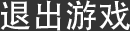
<style>
.page{position:relative;width:130px;height:31px;background:#333333}
.page>*{position:absolute;margin:0}
.t1{font:32.8px "AdobeHeitiStd-Regular";color:#ffffff}
</style>
<div class="page">
<p class="t1" style="left:0px;top:0px;width:130px;height:31px">退出游戏</p>
</div>
